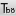
<style>
.page{position:relative;width:16px;height:16px}
.page>*{position:absolute;margin:0}
.t1{font:13.7px "MyriadPro-Regular";color:#272727}
.t2{font:7.6px "MyriadPro-Regular";color:#313131}
</style>
<div class="page">
<p class="t1" style="left:0px;top:3px;width:8px;height:10px">T</p>
<p class="t2" style="left:6px;top:7px;width:9px;height:6px">bö</p>
</div>
